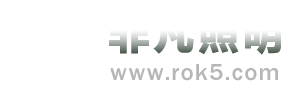
<style>
.page{position:relative;width:288px;height:94px;background:#ffffff}
.page>*{position:absolute;margin:0}
.t1{font:40px "MicrosoftYaHei";letter-spacing:0.1em;font-weight:bold}
.t2{font:24px "FranklinGothic-Medium";letter-spacing:0.075em;color:#b6b6b6}
</style>
<div class="page">
<p class="t1" style="left:109px;top:14px;width:172px;height:41px">非凡照明</p>
<p class="t2" style="left:110px;top:64px;width:168px;height:17px">www.rok5.com</p>
</div>
